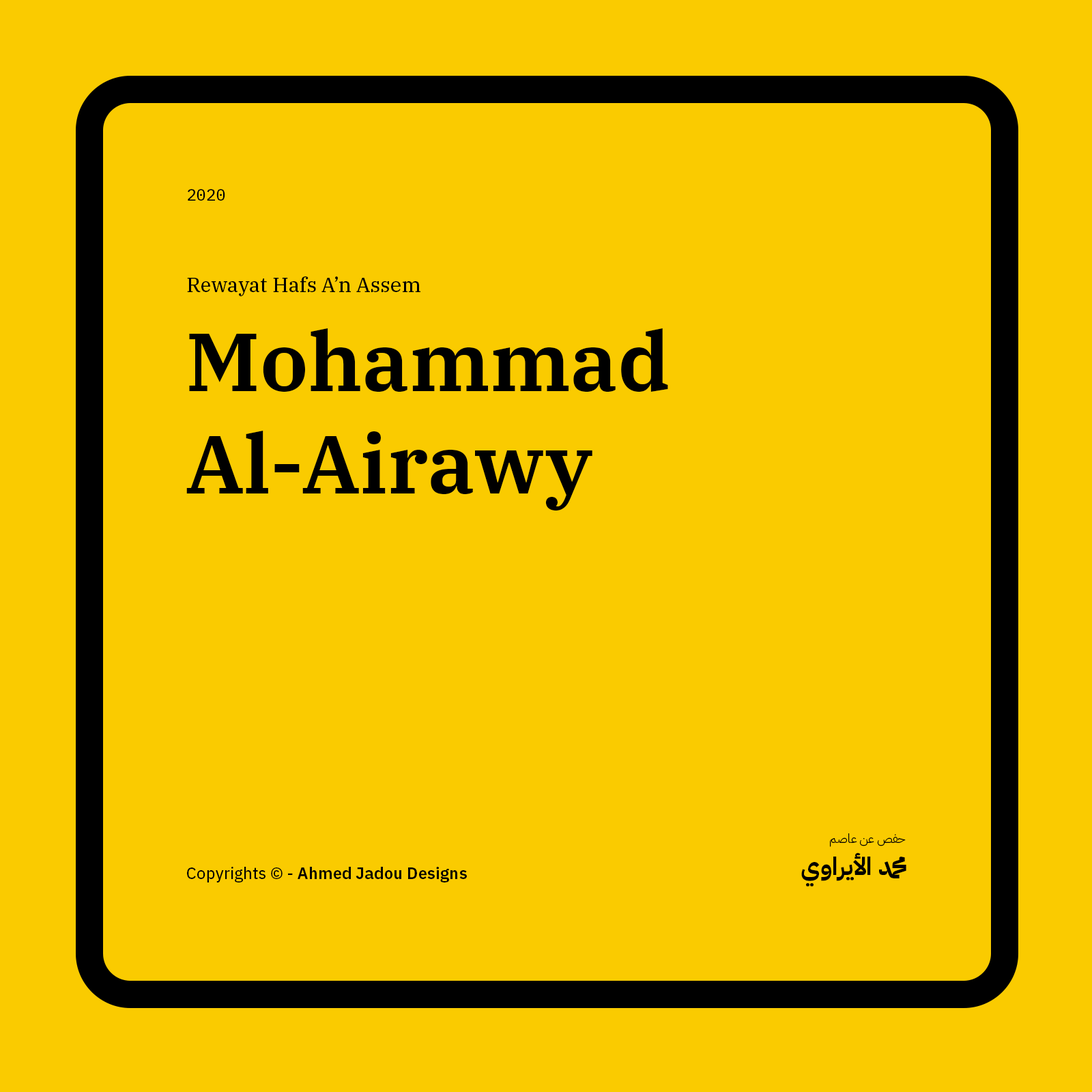
<style>
.page{position:relative;width:1092px;height:1092px;background:#facb00}
.page>*{position:absolute;margin:0}
.t1{font:16.4px "IBMPlexMono-Text";color:#000000}
.t2{font:20.5px "IBMPlexSerif-Text";color:#000000}
.t3{font:81.9px/102.7px "IBMPlexSerif-SemiBold";color:#000000}
.t4{font:12.3px "IBMPlexArabic-Light";color:#000000}
.t5{font:24.6px "IBMPlexArabic-Bold";color:#000000}
.t6{font:16.4px "IBMPlexSans-SemiBold";color:#000000}
.t7{font:16.4px "IBMPlexSans-Text";color:#000000}
</style>
<div class="page">
<p class="t1" style="left:188px;top:189px;width:37px;height:12px">2020</p>
<p class="t2" style="left:187px;top:276px;width:233px;height:20px">Rewayat Hafs A’n Assem</p>
<p class="t3" style="left:186px;top:328px;width:482px;height:183px">Mohammad Al-Airawy</p>
<p class="t4" style="left:830px;top:833px;width:76px;height:14px">حفص عن عاصم</p>
<p class="t5" style="left:801px;top:852px;width:105px;height:35px">محمد الأيراوي</p>
<p class="t6" style="left:187px;top:867px;width:280px;height:15px"><span class="t7">Copyrights © - </span>Ahmed Jadou Designs</p>
</div>
